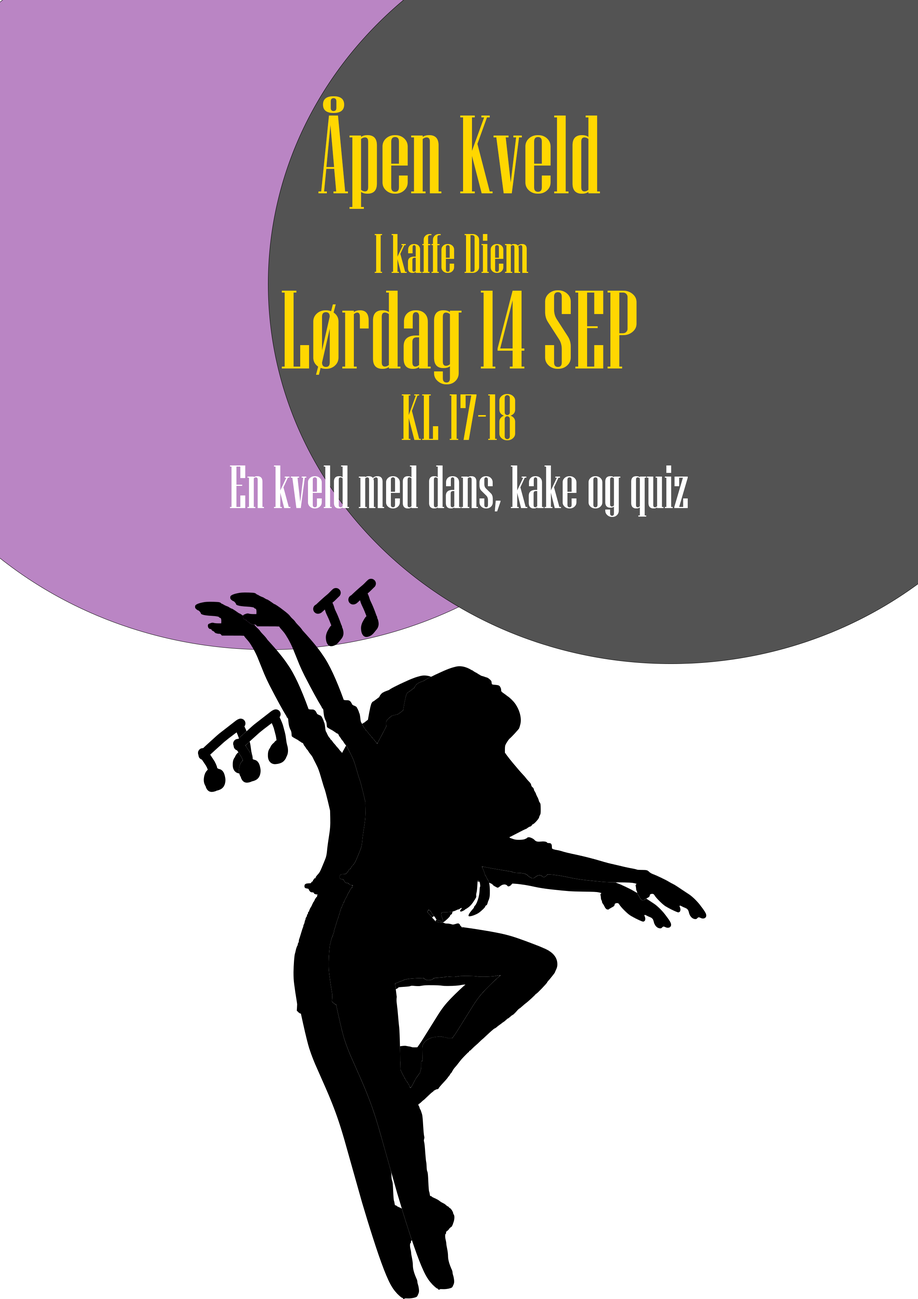
<style>
.page{position:relative;width:918px;height:1299px;background:#ffffff}
.page>*{position:absolute;margin:0}
.t1{font:111.1px "NiagaraSolid-Reg";color:#ffd700}
.t2{font:55.5px "NiagaraSolid-Reg";color:#ffd700}
.t3{font:65px "NiagaraSolid-Reg";color:#ffd700}
.t4{font:60.8px "NiagaraSolid-Reg";color:#ffffff}
</style>
<div class="page">
<p class="t1" style="left:318px;top:96px;width:282px;height:113px">Åpen Kveld</p>
<p class="t2" style="left:375px;top:234px;width:153px;height:39px">I kaffe Diem</p>
<p class="t1" style="left:282px;top:290px;width:355px;height:94px">Lørdag 14 SEP</p>
<p class="t3" style="left:402px;top:394px;width:113px;height:46px">KL 17-18</p>
<p class="t4" style="left:230px;top:465px;width:458px;height:52px">En kveld med dans, kake og quiz</p>
</div>
